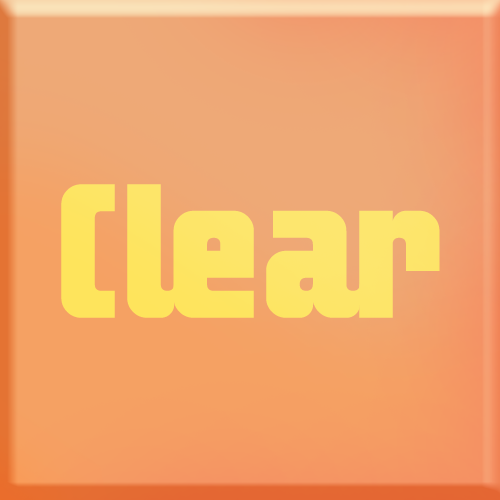
<style>
.page{position:relative;width:500px;height:500px}
.page>*{position:absolute;margin:0}
.t1{font:266.7px "Makimango";color:#eeda77}
</style>
<div class="page">
<p class="t1" style="left:61px;top:184px;width:379px;height:134px">Clear</p>
</div>
